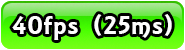
<style>
.page{position:relative;width:185px;height:50px}
.page>*{position:absolute;margin:0}
.t1{font:27.3px "ARESSENCE";letter-spacing:0.04em;color:#fefefe;scale:1.1 1}
</style>
<div class="page">
<p class="t1" style="left:12px;top:14px;width:160px;height:26px">40fps (25ms)</p>
</div>
